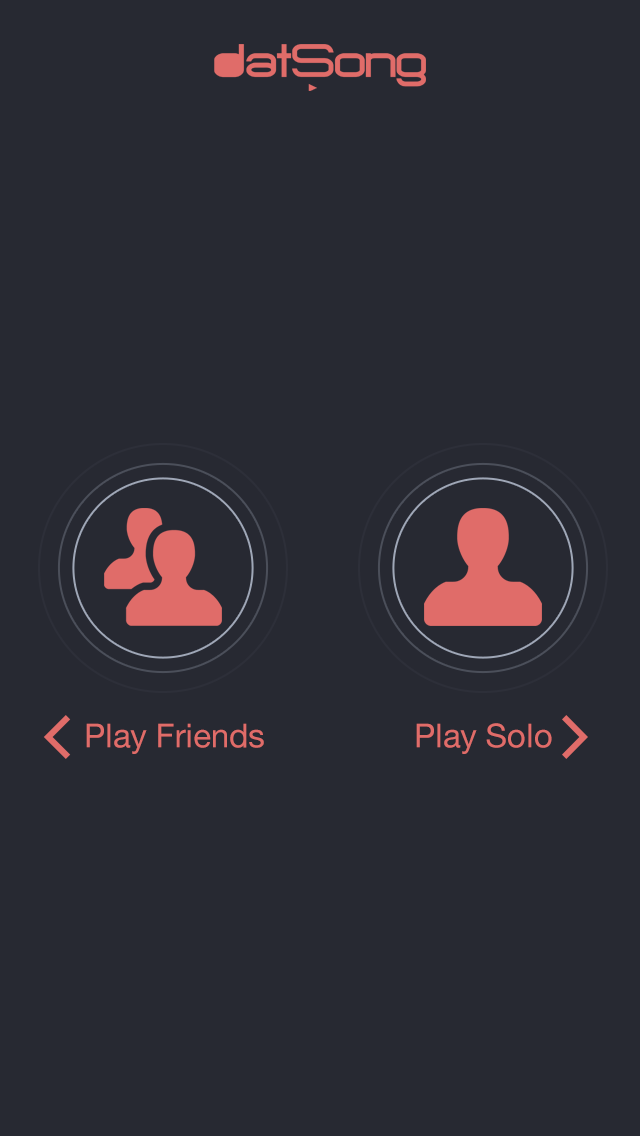
<style>
.page{position:relative;width:640px;height:1136px;background:#272932}
.page>*{position:absolute;margin:0}
.t1{font:32.9px "HelveticaNeue";color:#e06c69}
</style>
<div class="page">
<p class="t1" style="left:86px;top:723px;width:178px;height:31px">Play Friends</p>
<p class="t1" style="left:416px;top:723px;width:136px;height:31px">Play Solo</p>
</div>
